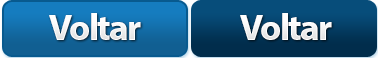
<style>
.page{position:relative;width:378px;height:58px}
.page>*{position:absolute;margin:0}
.t1{font:36.8px "MyriadPro-Bold";letter-spacing:-0.05em;color:#f8f8f8}
</style>
<div class="page">
<p class="t1" style="left:49px;top:13px;width:92px;height:27px">Voltar</p>
<p class="t1" style="left:240px;top:13px;width:92px;height:27px">Voltar</p>
</div>
